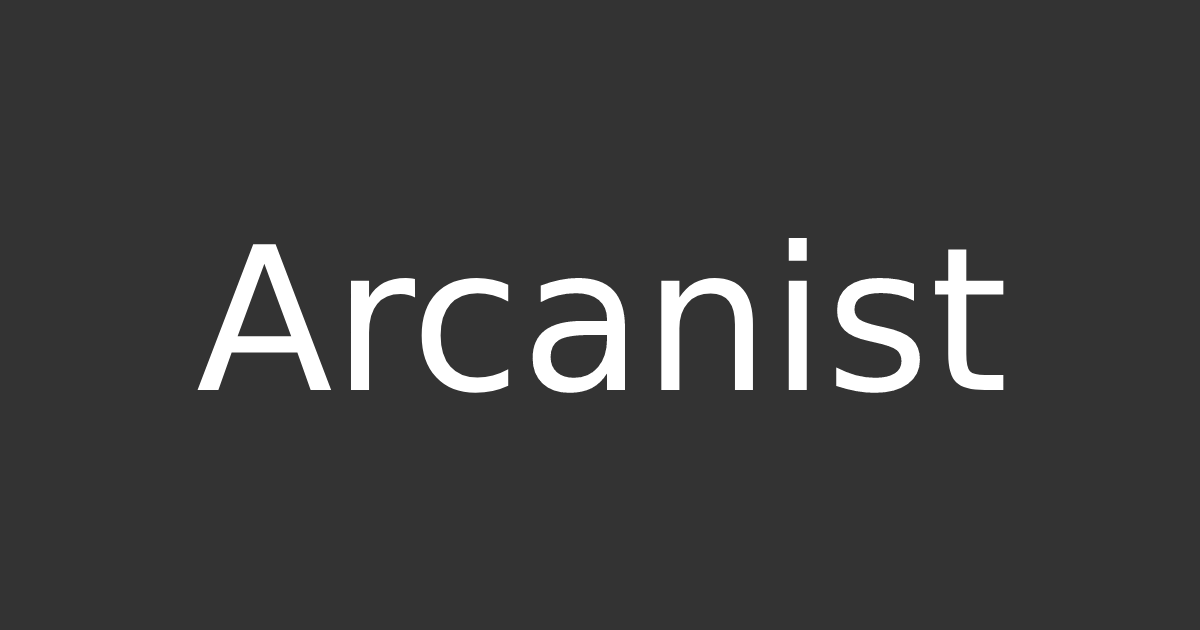
<style>
.page{position:relative;width:1200px;height:630px;background:#333333}
.page>*{position:absolute;margin:0}
.t1{font:200px "DejaVuSans";color:#ffffff}
</style>
<div class="page">
<p class="t1" style="left:197px;top:238px;width:807px;height:155px">Arcanist</p>
</div>
